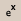
<style>
.page{position:relative;width:21px;height:21px;background:#d9cdc1}
.page>*{position:absolute;margin:0}
.t1{font:9px "Tahoma";color:#000000}
.t2{font:9px "Tahoma";color:#0d0c0b}
</style>
<div class="page">
<p class="t1" style="left:11px;top:5px;width:5px;height:5px">x</p>
<p class="t2" style="left:6px;top:10px;width:5px;height:7px">e</p>
</div>
